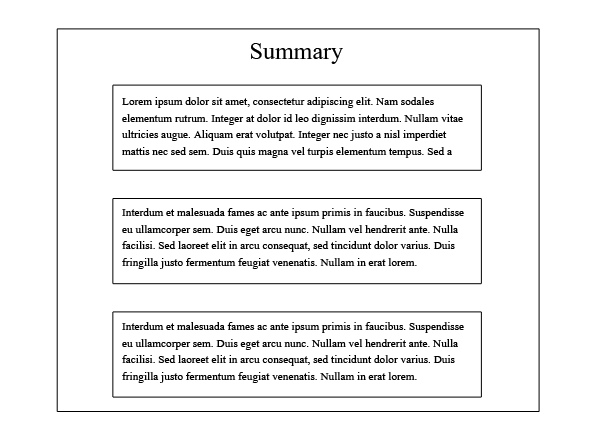
<style>
.page{position:relative;width:595px;height:425px;background:#ffffff}
.page>*{position:absolute;margin:0}
.t1{font:30px "Aparajita";color:#000000}
.t2{font:14px "Aparajita";color:#000000}
</style>
<div class="page">
<p class="t1" style="left:251px;top:43px;width:92px;height:21px">Summary</p>
<p class="t2" style="left:122px;top:97px;width:341px;height:61px">Lorem ipsum dolor sit amet, consectetur adipiscing elit. Nam sodales elementum rutrum. Integer at dolor id leo dignissim interdum. Nullam vitae ultricies augue. Aliquam erat volutpat. Integer nec justo a nisl imperdiet mattis nec sed sem. Duis quis magna vel turpis elementum tempus. Sed a lacus enim.</p>
<p class="t2" style="left:122px;top:208px;width:342px;height:61px">Interdum et malesuada fames ac ante ipsum primis in faucibus. Suspendisse eu ullamcorper sem. Duis eget arcu nunc. Nullam vel hendrerit ante. Nulla facilisi. Sed laoreet elit in arcu consequat, sed tincidunt dolor varius. Duis fringilla justo fermentum feugiat venenatis. Nullam in erat lorem.</p>
<p class="t2" style="left:122px;top:322px;width:342px;height:61px">Interdum et malesuada fames ac ante ipsum primis in faucibus. Suspendisse eu ullamcorper sem. Duis eget arcu nunc. Nullam vel hendrerit ante. Nulla facilisi. Sed laoreet elit in arcu consequat, sed tincidunt dolor varius. Duis fringilla justo fermentum feugiat venenatis. Nullam in erat lorem.</p>
</div>
